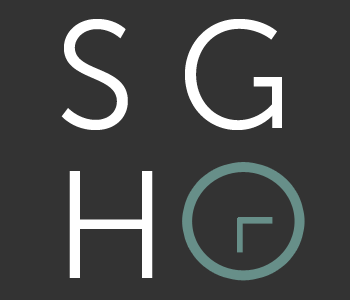
<style>
.page{position:relative;width:350px;height:300px;background:#333333}
.page>*{position:absolute;margin:0}
.t1{font:152px "MuseoSans-300";color:#ffffff}
</style>
<div class="page">
<p class="t1" style="left:61px;top:19px;width:221px;height:259px">S G<br>H</p>
</div>
